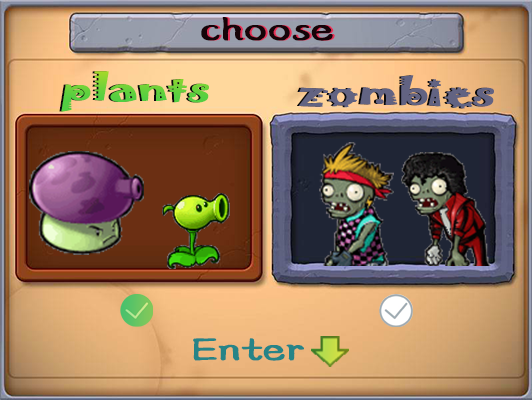
<style>
.page{position:relative;width:532px;height:400px}
.page>*{position:absolute;margin:0}
.t1{font:34.6px "HGXS_CNKI";letter-spacing:-0.02em;color:#150408;font-weight:bold;scale:1.43 1}
.t2{font:34.6px "HGXS_CNKI";letter-spacing:-0.02em;font-weight:bold;scale:1.43 1}
.t3{font:34.6px "Jokerman-Regular";letter-spacing:-0.02em;font-weight:bold;scale:1.43 1}
.t4{font:34.6px "Jokerman-Regular";letter-spacing:-0.02em;color:#63d13d;font-weight:bold;scale:1.43 1}
.t5{font:34.6px "Jokerman-Regular";letter-spacing:-0.02em;color:#626382;font-weight:bold;scale:1.43 1}
.t6{font:34.6px "HGXS_CNKI";letter-spacing:-0.02em;color:#268487;font-weight:bold;scale:1.43 1}
</style>
<div class="page">
<p class="t1" style="left:201px;top:17px;width:132px;height:24px">choose</p>
<p class="t2" style="left:203px;top:17px;width:132px;height:24px">choose</p>
<p class="t3" style="left:59px;top:71px;width:148px;height:41px">plants</p>
<p class="t4" style="left:61px;top:71px;width:148px;height:41px">plants</p>
<p class="t5" style="left:297px;top:75px;width:195px;height:34px">zombies</p>
<p class="t5" style="left:299px;top:75px;width:195px;height:34px">zombies</p>
<p class="t6" style="left:193px;top:338px;width:111px;height:23px">Enter</p>
</div>
